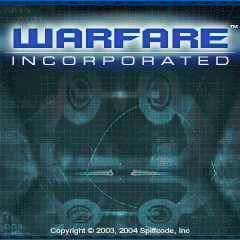
<style>
.page{position:relative;width:240px;height:240px;background:#1e3a3e}
.page>*{position:absolute;margin:0}
.t1{font:30px "Quadrangle";color:#1b49ac}
.t2{font:3.8px "Small Fonts";color:#ffffff;scale:1.18 1}
.t3{font:11.5px "Eurostile-ExtendedTwo";letter-spacing:0.45em;color:#ffffff;scale:1.18 1}
.t4{font:7px "ArialMT";color:#dee4e5;scale:1.18 1}
</style>
<div class="page">
<p class="t1" style="left:13px;top:28px;width:215px;height:20px">WARFARE</p>
<p class="t2" style="left:230px;top:25px;width:8px;height:3px">TM</p>
<p class="t3" style="left:12px;top:56px;width:217px;height:9px;opacity:0.9">INCORPORATED</p>
<p class="t4" style="left:50px;top:228px;width:140px;height:7px">Copyright © 2003, 2004 Spiffcode, Inc</p>
</div>
